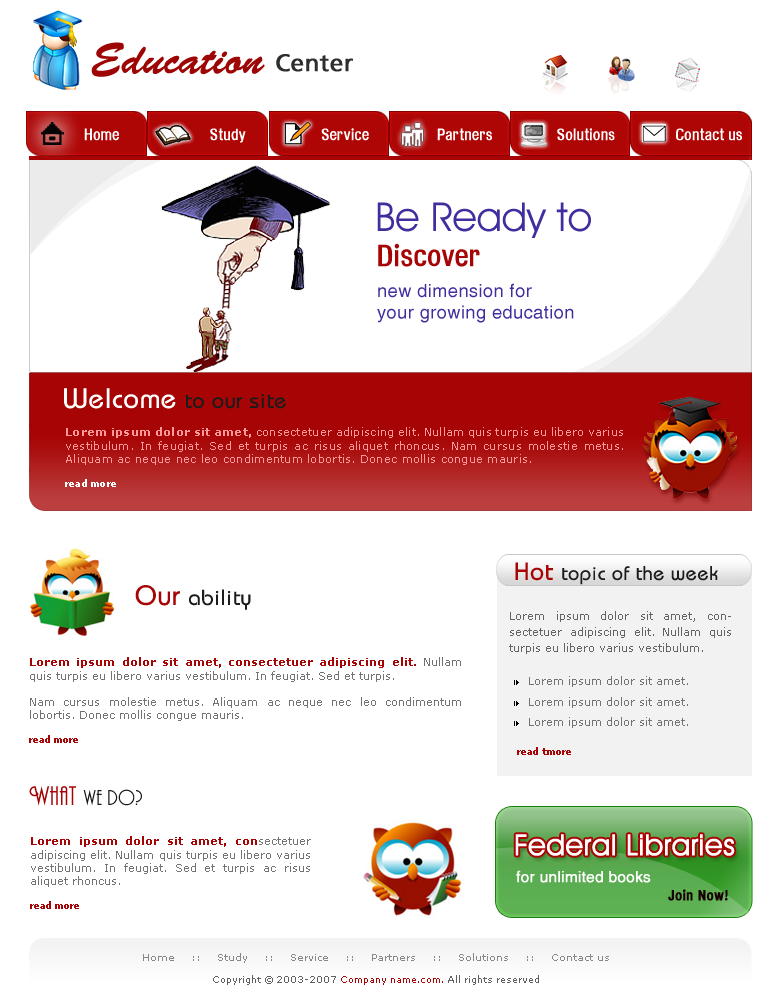
<style>
.page{position:relative;width:780px;height:1000px;background:#ffffff}
.page>*{position:absolute;margin:0}
.t1{font:44px "Banff-Normal";color:#9e0505}
.t2{font:24px "AGForeignerRomanMedium";color:#2e2e2e;font-weight:bold}
.t3{font:16px "HeadacheNormal";color:#ffffff}
.t4{font:40px "AvantGardeITCbyBT-Book";color:#422d9e}
.t5{font:30px "HeadacheNormal";color:#a70505}
.t6{font:18px "Helios";letter-spacing:0.025em;color:#422d9e}
.t7{font:22px "Bauhaus";letter-spacing:0.025em;color:#1b1b1b}
.t8{font:28px "Bauhaus";letter-spacing:0.025em;color:#ffffff}
.t9{font:11px "Verdana";letter-spacing:0.025em;color:#ff9999}
.t10{font:11px "Verdana-Bold";letter-spacing:0.025em;color:#ff9999}
.t11{font:9px "Verdana-Bold";letter-spacing:0.025em;color:#ffffff}
.t12{font:20px "Bauhaus";letter-spacing:0.025em;color:#1b1b1b}
.t13{font:25px "Bauhaus";letter-spacing:0.025em;color:#a70505}
.t14{font:28px "Bauhaus";letter-spacing:0.025em;color:#a70505}
.t15{font:11px/16px "Verdana";color:#646464}
.t16{font:11px "Verdana";color:#737373}
.t17{font:11px "Verdana-Bold";color:#a70505}
.t18{font:9px "Verdana-Bold";color:#a70505}
.t19{font:20px "Andes";letter-spacing:0.025em;color:#1b1b1b}
.t20{font:25px "Andes";letter-spacing:0.025em;color:#a70505}
.t21{font:29px "AvantGardeITCbyBT-Book";color:#ffffff;font-weight:bold}
.t22{font:15px "Helios";color:#ffffff;font-weight:bold}
.t23{font:14px "HeadacheNormal";letter-spacing:0.025em;color:#170000;font-weight:bold}
.t24{font:10px/22px "Verdana";color:#878787}
.t25{font:9px/22px "Verdana";color:#5f5f5f}
.t26{font:9px/22px "Verdana";color:#a70505}
</style>
<div class="page">
<p class="t1" style="left:91px;top:42px;width:174px;height:35px">Education</p>
<p class="t2" style="left:276px;top:54px;width:77px;height:18px">Center</p>
<p class="t3" style="left:84px;top:128px;width:658px;height:15px">Home                        Study                    Service                  Partners                 Solutions                Contact us</p>
<p class="t4" style="left:377px;top:202px;width:214px;height:36px">Be Ready to</p>
<p class="t5" style="left:378px;top:243px;width:102px;height:24px">Discover</p>
<p class="t6" style="left:377px;top:283px;width:197px;height:40px">new dimension for<br>your growing education</p>
<p class="t7" style="left:64px;top:388px;width:222px;height:21px"><span class="t8">Welcome </span>to our site</p>
<p class="t9" style="left:65px;top:427px;width:558px;height:60px;text-align:justify"><span class="t10">Lorem ipsum dolor sit amet,</span> consectetuer adipiscing elit. Nullam quis turpis eu libero varius vestibulum. In feugiat. Sed et turpis ac risus aliquet rhoncus. Nam cursus molestie metus. Aliquam ac neque nec leo condimentum lobortis. Donec mollis congue mauris. <br><br><span class="t11">read more</span></p>
<p class="t12" style="left:515px;top:562px;width:203px;height:23px"><span class="t13">Hot </span>topic of the week</p>
<p class="t7" style="left:135px;top:585px;width:116px;height:25px"><span class="t14">Our </span>ability</p>
<p class="t15" style="left:509px;top:611px;width:222px;height:43px;text-align:justify">Lorem ipsum dolor sit amet, consectetuer adipiscing elit. Nullam quis turpis eu libero varius vestibulum.</p>
<p class="t16" style="left:29px;top:657px;width:432px;height:86px;text-align:justify"><span class="t17">Lorem ipsum dolor sit amet, consectetuer adipiscing elit.</span> Nullam quis turpis eu libero varius vestibulum. In feugiat. Sed et turpis.<br><br>Nam cursus molestie metus. Aliquam ac neque nec leo condimentum lobortis. Donec mollis congue mauris. <br><br><span class="t18">read more</span></p>
<p class="t16" style="left:529px;top:676px;width:159px;height:11px">Lorem ipsum dolor sit amet.</p>
<p class="t16" style="left:529px;top:697px;width:159px;height:11px">Lorem ipsum dolor sit amet.</p>
<p class="t16" style="left:529px;top:717px;width:159px;height:11px">Lorem ipsum dolor sit amet.</p>
<p class="t18" style="left:517px;top:747px;width:54px;height:8px"><span class="t16"><br></span>read tmore</p>
<p class="t19" style="left:29px;top:786px;width:113px;height:20px"><span class="t20">What </span>we do?</p>
<p class="t16" style="left:30px;top:836px;width:281px;height:73px;text-align:justify"><span class="t17">Lorem ipsum dolor sit amet, con</span>sectetuer adipiscing elit. Nullam quis turpis eu libero varius vestibulum. In feugiat. Sed et turpis ac risus aliquet rhoncus. <br><br><span class="t18">read more</span></p>
<p class="t21" style="left:515px;top:834px;width:220px;height:22px">Federal Libraries</p>
<p class="t22" style="left:516px;top:870px;width:135px;height:13px">for unlimited books</p>
<p class="t23" style="left:668px;top:889px;width:60px;height:12px">Join Now!</p>
<p class="t24" style="left:143px;top:953px;width:466px;height:32px;text-align:center">Home    ::    Study    ::    Service    ::    Partners    ::    Solutions    ::    Contact us<br><span class="t25">Copyright © 2003-2007</span><span class="t26"> Company name.com. </span><span class="t25">All rights reserved</span></p>
</div>
